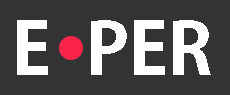
<style>
.page{position:relative;width:230px;height:95px;background:#333333}
.page>*{position:absolute;margin:0}
.t1{font:71.8px "KozGoPr6N-Bold";color:#ffffff}
.t2{font:71.7px "KozGoPr6N-Bold";color:#ffffff}
</style>
<div class="page">
<p class="t1" style="left:17px;top:20px;width:31px;height:55px">E</p>
<p class="t2" style="left:91px;top:20px;width:120px;height:55px">PER</p>
</div>
